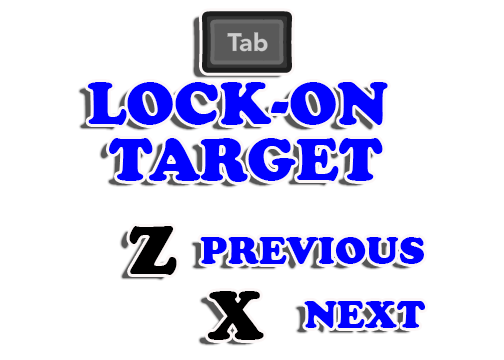
<style>
.page{position:relative;width:504px;height:360px;background:#ffffff}
.page>*{position:absolute;margin:0}
.t1{font:62px/56px "CooperBlack";color:#0000ff;text-transform:uppercase}
.t2{font:70px "CooperBlack";color:#000000;text-transform:uppercase}
.t3{font:40px "CooperBlack";color:#0000ff;text-transform:uppercase}
</style>
<div class="page">
<p class="t1" style="left:87px;top:82px;width:301px;height:100px;text-align:center">Lock-on <br>target</p>
<p class="t2" style="left:129px;top:226px;width:48px;height:49px">Z</p>
<p class="t3" style="left:200px;top:237px;width:224px;height:27px">previous</p>
<p class="t2" style="left:207px;top:291px;width:57px;height:49px">x</p>
<p class="t3" style="left:304px;top:301px;width:121px;height:27px">Next</p>
</div>
